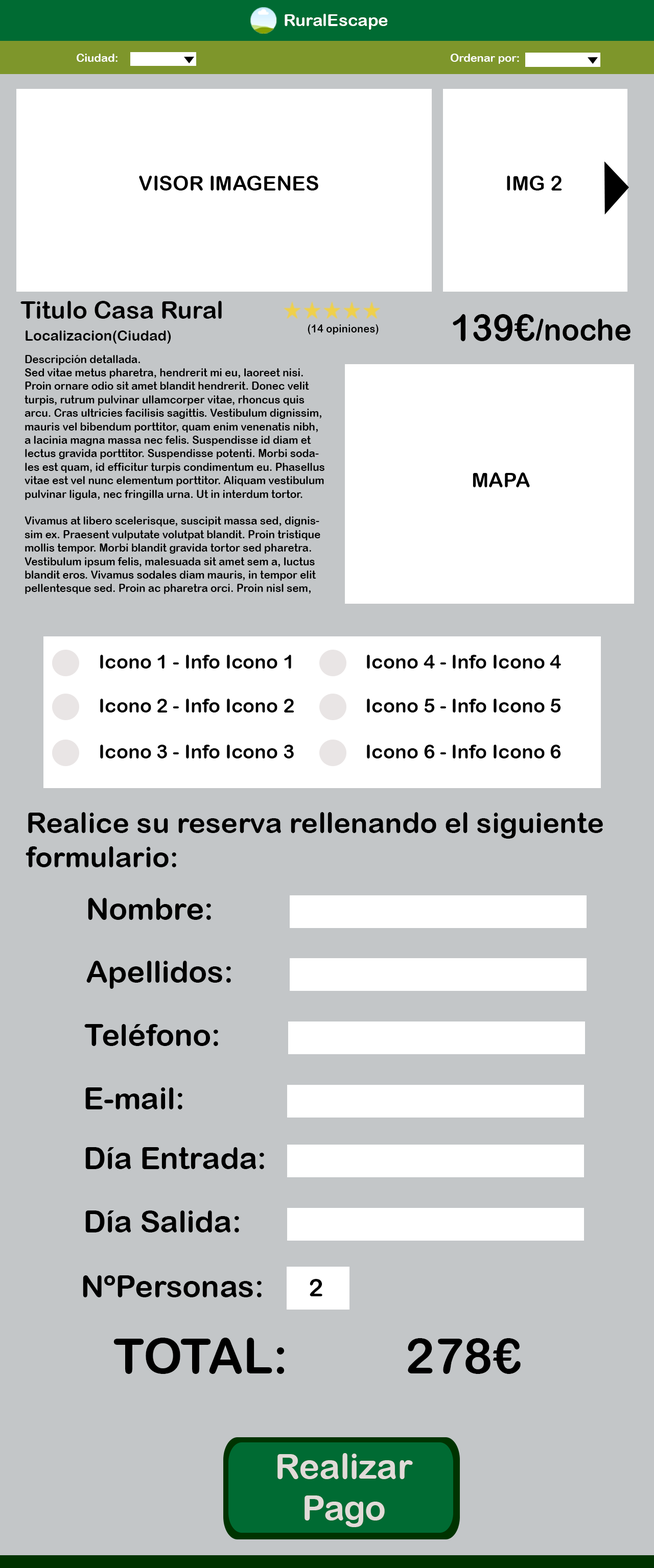
<style>
.page{position:relative;width:654px;height:1568px;background:#c3c6c8}
.page>*{position:absolute;margin:0}
.t1{font:17px "ArialRoundedMTBold";color:#ffffff}
.t2{font:11.1px "ArialRoundedMTBold";color:#ffffff}
.t3{font:11.3px "ArialRoundedMTBold";color:#ffffff}
.t4{font:20.5px "ArialRoundedMTBold";color:#000000}
.t5{font:24.5px "ArialRoundedMTBold";color:#000000}
.t6{font:30.6px "ArialRoundedMTBold";color:#000000;scale:0.97 1}
.t7{font:36.8px "ArialRoundedMTBold";color:#000000;scale:0.97 1}
.t8{font:11.1px "ArialRoundedMTBold";color:#000000;scale:0.94 1}
.t9{font:14.3px "ArialRoundedMTBold";color:#000000}
.t10{font:11.2px "ArialRoundedMTBold";color:#000000;scale:0.94 1}
.t11{font:19.5px "ArialRoundedMTBold";color:#000000}
.t12{font:28.6px "ArialRoundedMTBold";color:#000000}
.t13{font:30.6px "ArialRoundedMTBold";color:#000000}
.t14{font:24.2px "ArialRoundedMTBold";color:#000000}
.t15{font:49px "ArialRoundedMTBold";color:#000000}
.t16{font:34.5px "ArialRoundedMTBold";color:#e1dbd8}
</style>
<div class="page">
<p class="t1" style="left:284px;top:14px;width:104px;height:16px">RuralEscape</p>
<p class="t2" style="left:77px;top:54px;width:40px;height:8px">Ciudad:</p>
<p class="t3" style="left:450px;top:54px;width:69px;height:10px">Ordenar por:</p>
<p class="t4" style="left:139px;top:176px;width:179px;height:15px">VISOR IMAGENES</p>
<p class="t4" style="left:507px;top:176px;width:55px;height:15px">IMG 2</p>
<p class="t5" style="left:20px;top:301px;width:202px;height:18px">Titulo Casa Rural</p>
<p class="t6" style="left:453px;top:314px;width:177px;height:27px"><span class="t7">139€</span>/noche</p>
<p class="t8" style="left:307px;top:324px;width:71px;height:11px">(14 opiniones)</p>
<p class="t9" style="left:26px;top:330px;width:145px;height:14px">Localizacion(Ciudad)</p>
<p class="t10" style="left:25px;top:355px;width:299px;height:239px">Descripción detallada.<br>Sed vitae metus pharetra, hendrerit mi eu, laoreet nisi. Proin ornare odio sit amet blandit hendrerit. Donec velit turpis, rutrum pulvinar ullamcorper vitae, rhoncus quis arcu. Cras ultricies facilisis sagittis. Vestibulum dignissim, mauris vel bibendum porttitor, quam enim venenatis nibh, a lacinia magna massa nec felis. Suspendisse id diam et lectus gravida porttitor. Suspendisse potenti. Morbi sodales est quam, id efficitur turpis condimentum eu. Phasellus vitae est vel nunc elementum porttitor. Aliquam vestibulum pulvinar ligula, nec fringilla urna. Ut in interdum tortor.<br><br>Vivamus at libero scelerisque, suscipit massa sed, dignissim ex. Praesent vulputate volutpat blandit. Proin tristique mollis tempor. Morbi blandit gravida tortor sed pharetra. Vestibulum ipsum felis, malesuada sit amet sem a, luctus blandit eros. Vivamus sodales diam mauris, in tempor elit pellentesque sed. Proin ac pharetra orci. Proin nisl sem, scelerisque quis neque nec, vestibulum vehicula est.<br><br>Etiam et velit a tortor dignissim egestas nec a odio. Donec sit amet quam facilisis, dignissim dui eu, venenatis neque. Vestibulum pulvinar diam et est mollis, non pellentesque leo tempus. Mauris vitae orci non nisl ultrices molestie. Maecenas quis luctus diam, in pretium metus. Etiam vel arcu sed est scelerisque pharetra eget non metus. Sed ipsum elit, volutpat non iaculis id, posuere quis mi. Etiam condimentum enim et felis placerat molestie. Sed tincidunt sem ante, sed feugiat arcu auctor ut.</p>
<p class="t4" style="left:472px;top:472px;width:58px;height:15px">MAPA</p>
<p class="t11" style="left:100px;top:655px;width:191px;height:14px">Icono 1 - Info Icono 1</p>
<p class="t11" style="left:367px;top:655px;width:194px;height:14px">Icono 4 - Info Icono 4</p>
<p class="t11" style="left:100px;top:699px;width:194px;height:13px">Icono 2 - Info Icono 2</p>
<p class="t11" style="left:367px;top:699px;width:194px;height:13px">Icono 5 - Info Icono 5</p>
<p class="t11" style="left:100px;top:745px;width:194px;height:13px">Icono 3 - Info Icono 3</p>
<p class="t11" style="left:367px;top:745px;width:194px;height:13px">Icono 6 - Info Icono 6</p>
<p class="t12" style="left:26px;top:812px;width:577px;height:55px">Realice su reserva rellenando el siguiente formulario:</p>
<p class="t13" style="left:88px;top:898px;width:123px;height:22px">Nombre:</p>
<p class="t13" style="left:86px;top:961px;width:145px;height:28px">Apellidos:</p>
<p class="t13" style="left:84px;top:1024px;width:134px;height:22px">Teléfono:</p>
<p class="t13" style="left:85px;top:1087px;width:97px;height:22px">E-mail:</p>
<p class="t13" style="left:85px;top:1147px;width:179px;height:22px">Día Entrada:</p>
<p class="t13" style="left:85px;top:1210px;width:154px;height:22px">Día Salida:</p>
<p class="t13" style="left:83px;top:1275px;width:179px;height:22px">NºPersonas:</p>
<p class="t14" style="left:310px;top:1279px;width:12px;height:17px">2</p>
<p class="t15" style="left:113px;top:1338px;width:171px;height:36px">TOTAL:</p>
<p class="t15" style="left:408px;top:1338px;width:112px;height:36px">278€</p>
<p class="t16" style="left:277px;top:1453px;width:136px;height:74px;text-align:center">Realizar<br>Pago</p>
</div>
